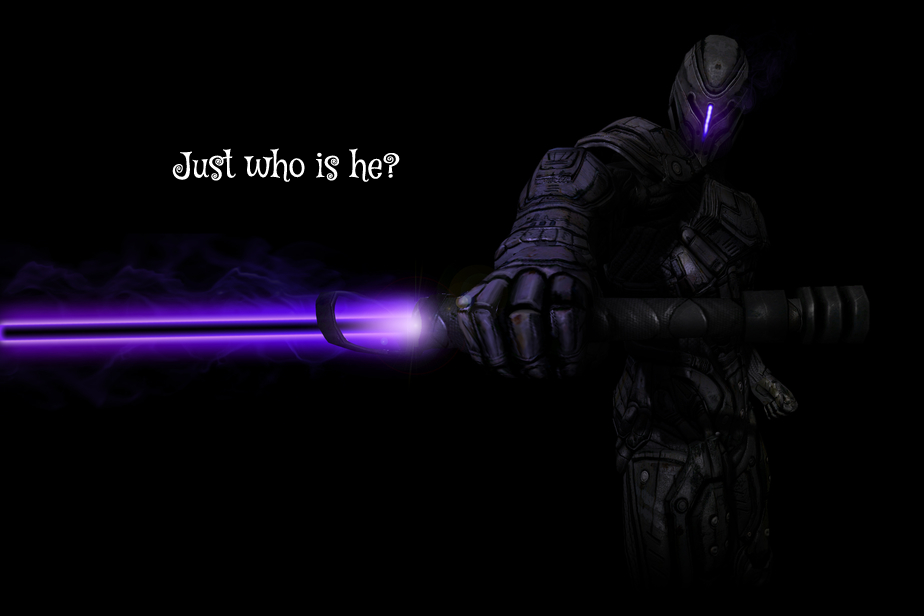
<style>
.page{position:relative;width:924px;height:616px;background:#000000}
.page>*{position:absolute;margin:0}
.t1{font:34.6px "MysteryQuest";color:#ffffff}
</style>
<div class="page">
<p class="t1" style="left:172px;top:148px;width:228px;height:34px">Just who is he?</p>
</div>
